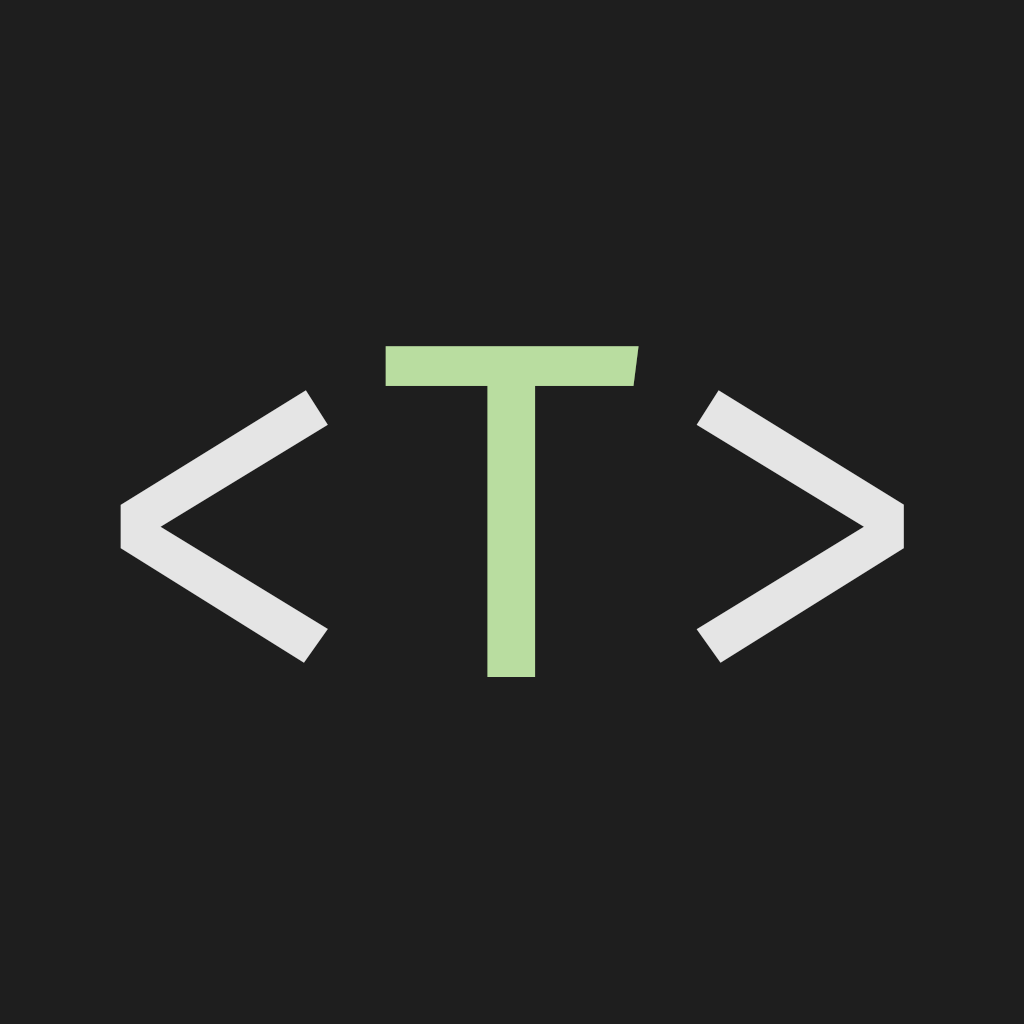
<style>
.page{position:relative;width:1024px;height:1024px;background:#1e1e1e}
.page>*{position:absolute;margin:0}
.t1{font:468px "FiraCode-Retina";color:#e5e5e5}
.t2{font:468px "FiraCode-Retina";color:#b9dda0}
</style>
<div class="page">
<p class="t1" style="left:120px;top:346px;width:784px;height:331px">&lt;<span class="t2">T</span>&gt;</p>
</div>
